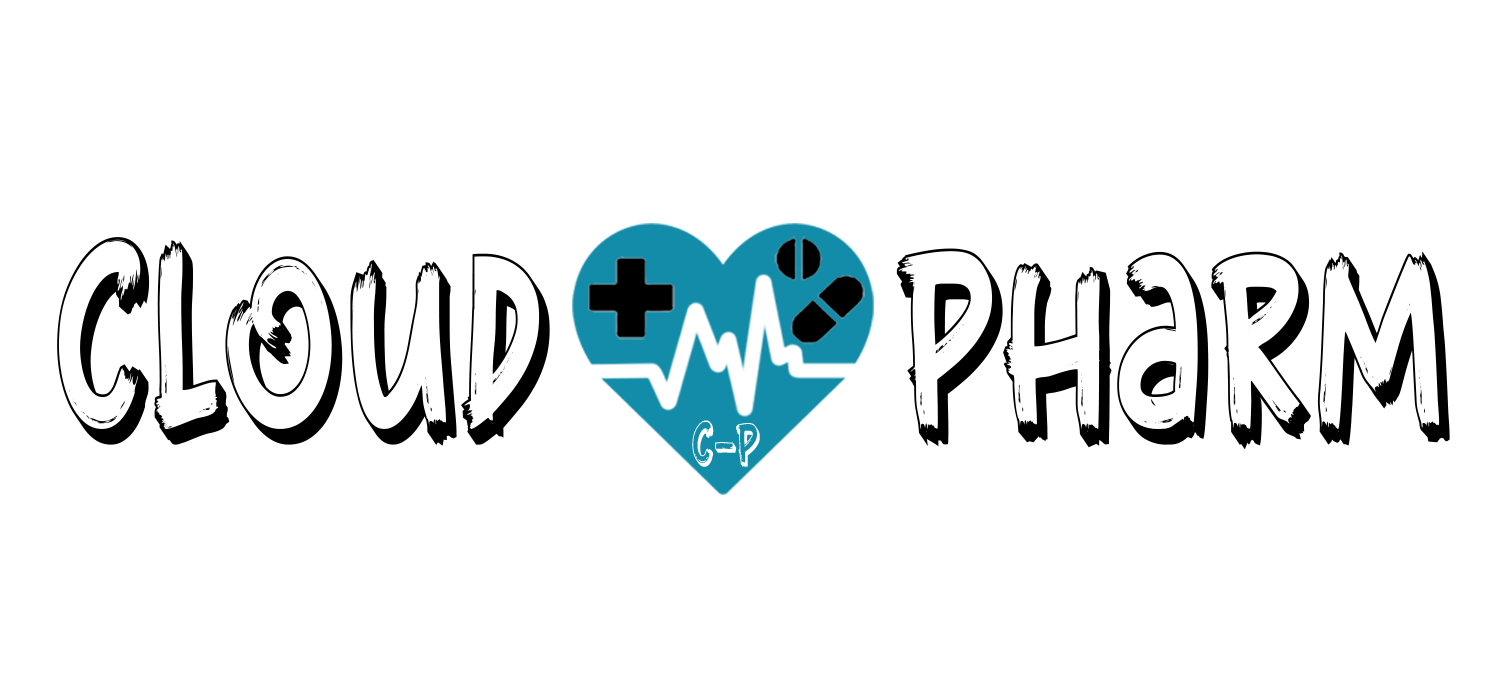
<style>
.page{position:relative;width:1500px;height:700px;background:#ffffff}
.page>*{position:absolute;margin:0}
.t1{font:260.4px "BombtrackDemo";color:#000000;scale:0.67 1}
</style>
<div class="page">
<p class="t1" style="left:57px;top:237px;width:1393px;height:213px">CLOUD        Pharm</p>
</div>
